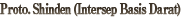
<style>
.page{position:relative;width:184px;height:19px;background:#ffffff}
.page>*{position:absolute;margin:0}
.t1{font:14px "RyuminPro-ExBold";letter-spacing:-0.08em;color:#4a3f32;font-weight:bold;scale:0.8 1}
</style>
<div class="page">
<p class="t1" style="left:0px;top:3px;width:181px;height:14px">Proto. Shinden (Intersep Basis Darat)</p>
</div>
